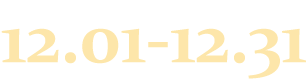
<style>
.page{position:relative;width:308px;height:81px;background:#ffffff}
.page>*{position:absolute;margin:0}
.t1{font:72px "Constantia-Bold";letter-spacing:-0.013em;color:#fde6aa}
</style>
<div class="page">
<p class="t1" style="left:1px;top:28px;width:305px;height:51px">12.01-12.31</p>
</div>
